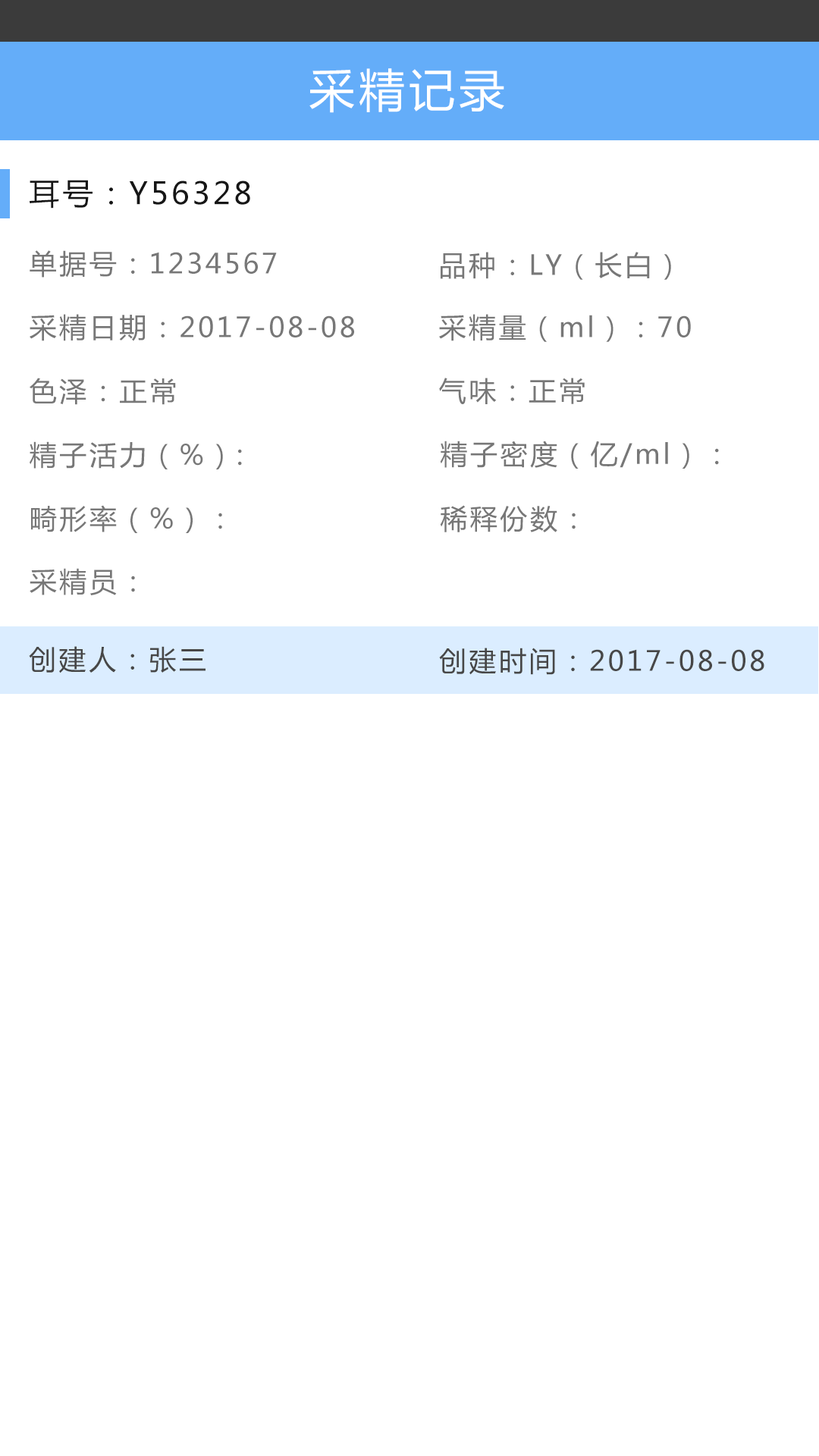
<style>
.page{position:relative;width:819px;height:1456px;background:#ffffff}
.page>*{position:absolute;margin:0}
.t1{font:45.5px "MicrosoftYaHei";letter-spacing:0.1em;color:#ffffff}
.t2{font:30.3px "MicrosoftYaHei";letter-spacing:0.1em;color:#161616}
.t3{font:27.3px "MicrosoftYaHei";letter-spacing:0.1em;color:#777777}
.t4{font:27.3px "MicrosoftYaHei";letter-spacing:0.1em;color:#474747}
</style>
<div class="page">
<p class="t1" style="left:309px;top:68px;width:195px;height:45px">采精记录</p>
<p class="t2" style="left:30px;top:180px;width:220px;height:29px">耳号：Y56328</p>
<p class="t3" style="left:30px;top:250px;width:247px;height:28px">单据号：1234567</p>
<p class="t3" style="left:441px;top:252px;width:230px;height:28px">品种：LY（长白）</p>
<p class="t3" style="left:30px;top:314px;width:324px;height:27px">采精日期：2017-08-08</p>
<p class="t3" style="left:439px;top:314px;width:252px;height:28px">采精量（ml）：70</p>
<p class="t3" style="left:30px;top:378px;width:146px;height:27px">色泽：正常</p>
<p class="t3" style="left:439px;top:378px;width:146px;height:26px">气味：正常</p>
<p class="t3" style="left:30px;top:441px;width:212px;height:28px">精子活力（%）:</p>
<p class="t3" style="left:440px;top:441px;width:279px;height:28px">精子密度（亿/ml）：</p>
<p class="t3" style="left:31px;top:505px;width:191px;height:28px">畸形率（%）：</p>
<p class="t3" style="left:440px;top:505px;width:136px;height:27px">稀释份数：</p>
<p class="t3" style="left:30px;top:568px;width:105px;height:27px">采精员：</p>
<p class="t4" style="left:29px;top:646px;width:177px;height:27px">创建人：张三</p>
<p class="t4" style="left:439px;top:648px;width:325px;height:27px">创建时间：2017-08-08</p>
</div>
